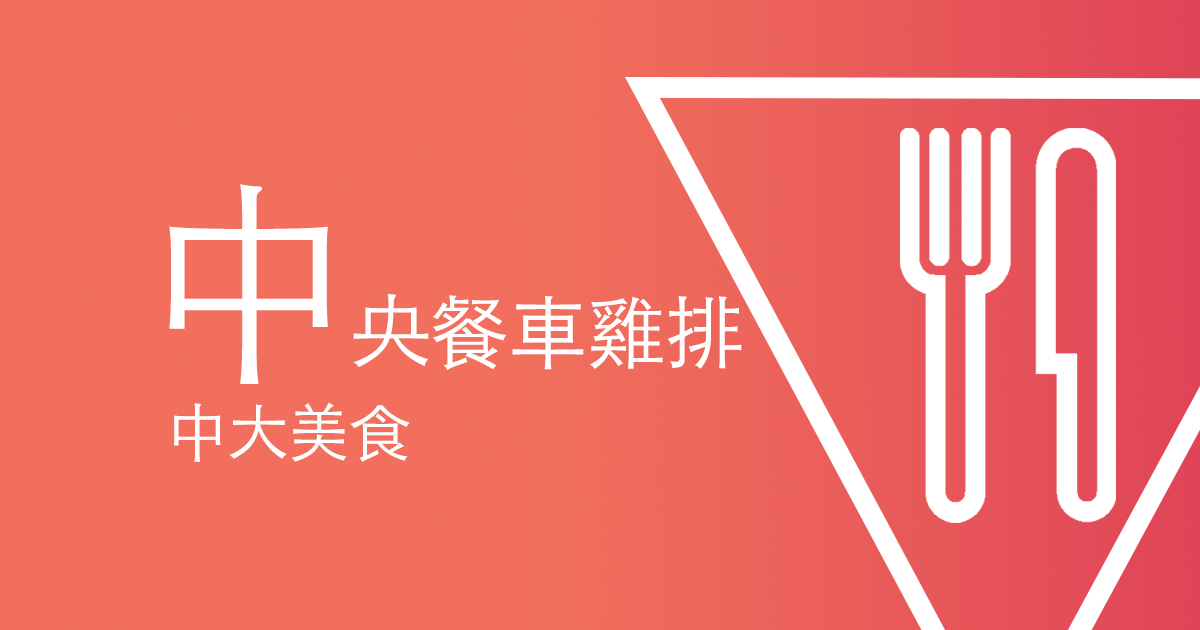
<style>
.page{position:relative;width:1200px;height:630px;background:#f16f5c}
.page>*{position:absolute;margin:0}
.t1{font:80px "STHeitiTC-Light";letter-spacing:-0.02em;color:#ffffff}
.t2{font:213.3px "STHeitiTC-Light";letter-spacing:-0.02em;color:#ffffff}
.t3{font:62.2px "STHeitiTC-Light";letter-spacing:-0.02em;color:#ffffff}
</style>
<div class="page">
<p class="t1" style="left:169px;top:184px;width:573px;height:200px"><span class="t2">中</span>央餐車雞排</p>
<p class="t3" style="left:174px;top:402px;width:236px;height:60px">中大美食</p>
</div>
